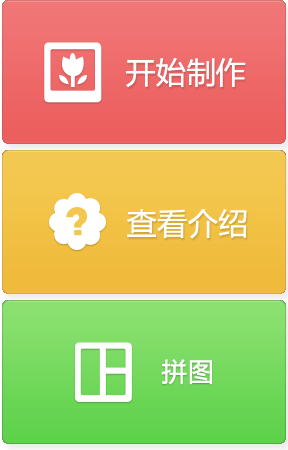
<style>
.page{position:relative;width:288px;height:450px}
.page>*{position:absolute;margin:0}
.t1{font:30px "MicrosoftYaHei";letter-spacing:0.05em;color:#ffffff}
</style>
<div class="page">
<p class="t1" style="left:126px;top:57px;width:120px;height:31px">开始制作</p>
<p class="t1" style="left:127px;top:209px;width:120px;height:30px">查看介绍</p>
</div>
